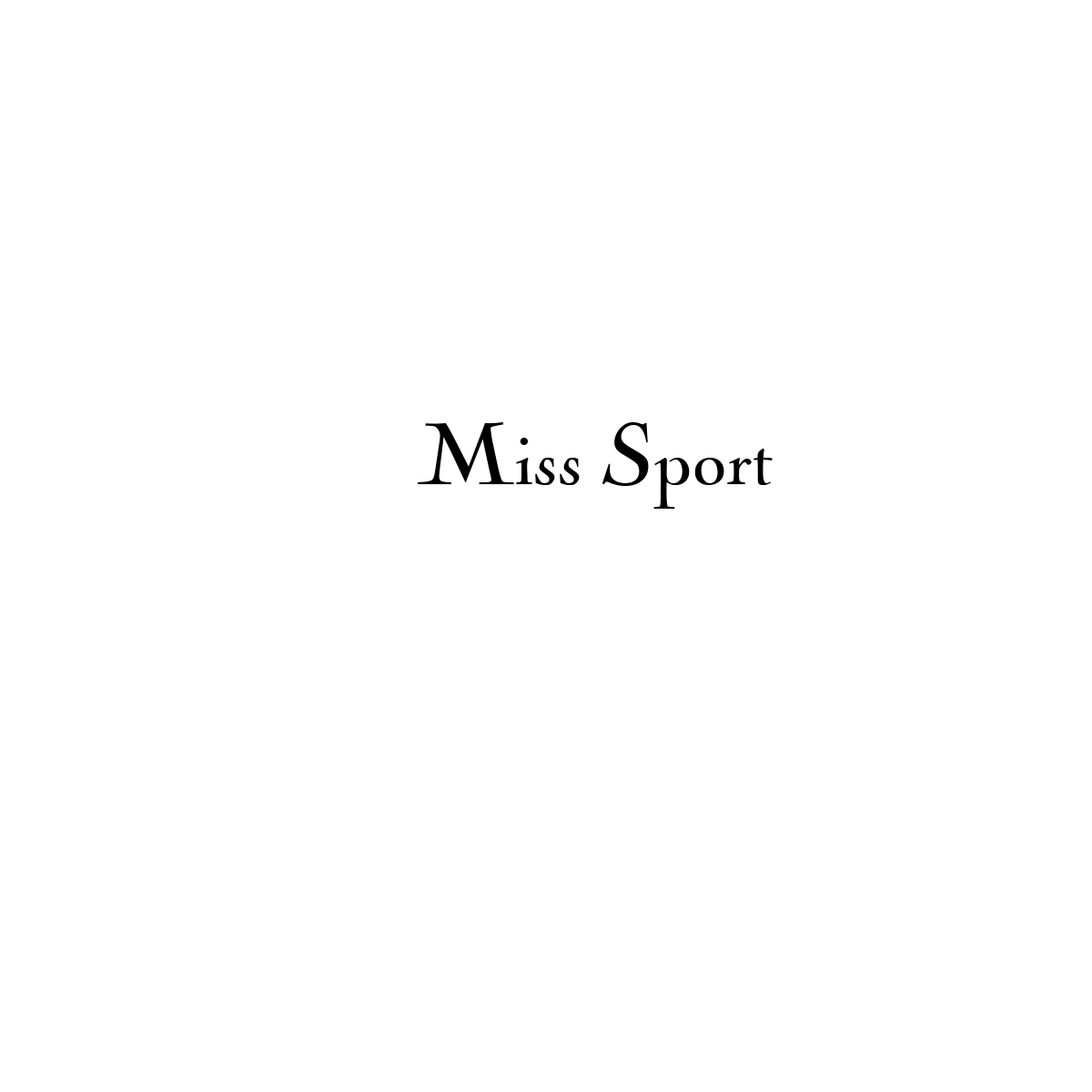
<style>
.page{position:relative;width:1092px;height:1092px;background:#ffffff}
.page>*{position:absolute;margin:0}
.t1{font:91.1px "NicolasCochinEF";color:#000000}
</style>
<div class="page">
<p class="t1" style="left:418px;top:422px;width:355px;height:87px">Miss Sport</p>
</div>
